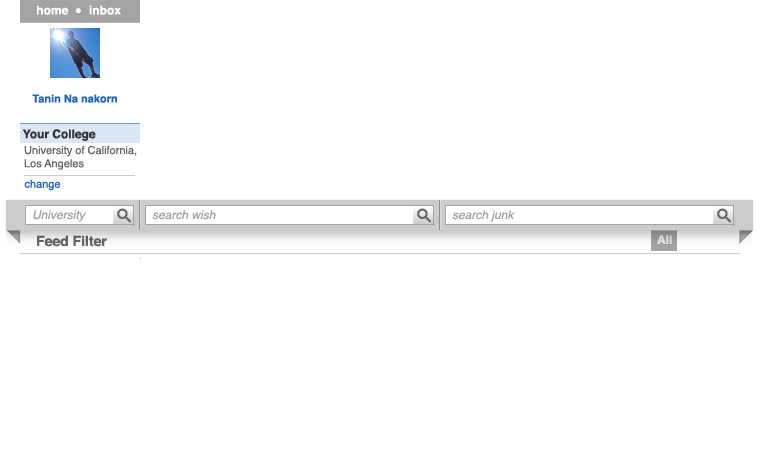
<style>
.page{position:relative;width:760px;height:456px;background:#ffffff}
.page>*{position:absolute;margin:0}
.t1{font:12px "Helvetica-Bold";color:#ffffff}
.t2{font:12px "LucidaGrande";color:#ffffff}
.t3{font:11px "Helvetica-Bold";color:#1963bd}
.t4{font:12px "Helvetica-Bold";color:#333333}
.t5{font:11px "Helvetica";color:#666666}
.t6{font:11px "Helvetica";color:#1963bd}
.t7{font:12px "Helvetica-Oblique";color:#a3a3a3}
.t8{font:14px "Helvetica-Bold";color:#666666}
.t9{font:12px "Helvetica-Bold";color:#e3e3e3}
</style>
<div class="page">
<p class="t1" style="left:37px;top:5px;width:84px;height:10px">home  <span class="t2">● </span> inbox</p>
<p class="t3" style="left:32px;top:94px;width:85px;height:9px">Tanin Na nakorn</p>
<p class="t4" style="left:22px;top:129px;width:74px;height:12px">Your College</p>
<p class="t5" style="left:24px;top:145px;width:113px;height:25px">University of California, <br>Los Angeles</p>
<p class="t6" style="left:24px;top:179px;width:37px;height:12px">change</p>
<p class="t7" style="left:33px;top:210px;width:53px;height:12px">University</p>
<p class="t7" style="left:152px;top:210px;width:64px;height:10px">search wish</p>
<p class="t7" style="left:452px;top:210px;width:63px;height:12px">search junk</p>
<p class="t8" style="left:37px;top:235px;width:70px;height:12px">Feed Filter</p>
<p class="t9" style="left:657px;top:235px;width:15px;height:9px">All</p>
</div>
